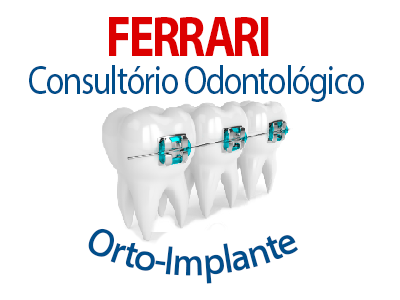
<style>
.page{position:relative;width:400px;height:300px;background:#ffffff}
.page>*{position:absolute;margin:0}
.t1{font:57.4px "MyriadPro-Bold";letter-spacing:-0.06em;color:#dc0000;scale:0.84 1}
.t2{font:40.5px "MyriadPro-Regular";letter-spacing:-0.04em;color:#004e8b;scale:0.84 1}
.t3{font:40.5px "MyriadPro-Semibold";letter-spacing:-0.06em;color:#004e8b;scale:0.84 1}
</style>
<div class="page">
<p class="t1" style="left:109px;top:17px;width:160px;height:39px">FERRARI</p>
<p class="t2" style="left:29px;top:65px;width:335px;height:37px">Consultório Odontológico</p>
<p class="t3" style="left:88px;top:228px;width:210px;height:56px">Orto-Implante</p>
</div>
